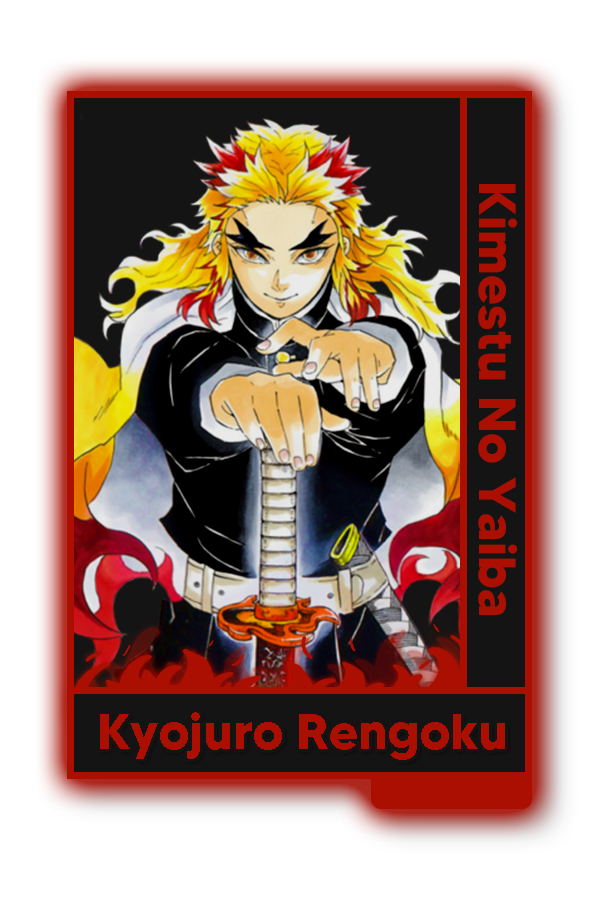
<style>
.page{position:relative;width:600px;height:900px;background:#ffffff}
.page>*{position:absolute;margin:0}
.t1{font:52px "MADETOMMY-Bold";color:#ab0f01}
.t2{font:50.5px "MADETOMMY-Bold";color:#ab0f01}
</style>
<div class="page">
<p class="t1" style="left:478px;top:184px;width:40px;height:431px;rotate:90deg">Kimestu No Yaiba</p>
<p class="t2" style="left:100px;top:712px;width:405px;height:48px">Kyojuro Rengoku</p>
</div>
